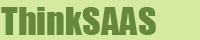
<style>
.page{position:relative;width:200px;height:40px;background:#d6e9a0}
.page>*{position:absolute;margin:0}
.t1{font:36px "Impact";color:#66873e}
</style>
<div class="page">
<p class="t1" style="left:1px;top:7px;width:155px;height:28px">ThinkSAAS</p>
</div>
